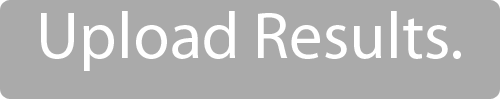
<style>
.page{position:relative;width:500px;height:100px;background:#aaaaaa}
.page>*{position:absolute;margin:0}
.t1{font:66.7px "MyriadPro-Regular";color:#ffffff}
</style>
<div class="page">
<p class="t1" style="left:41px;top:11px;width:420px;height:60px">Upload Results.</p>
</div>
